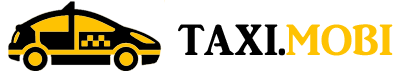
<style>
.page{position:relative;width:410px;height:80px;background:#ffffff}
.page>*{position:absolute;margin:0}
.t1{font:45px "ARJULIAN";color:#000000}
.t2{font:45px "ARJULIAN";color:#fec202}
</style>
<div class="page">
<p class="t1" style="left:178px;top:24px;width:215px;height:32px">TAXI.<span class="t2">MOBI</span></p>
</div>
